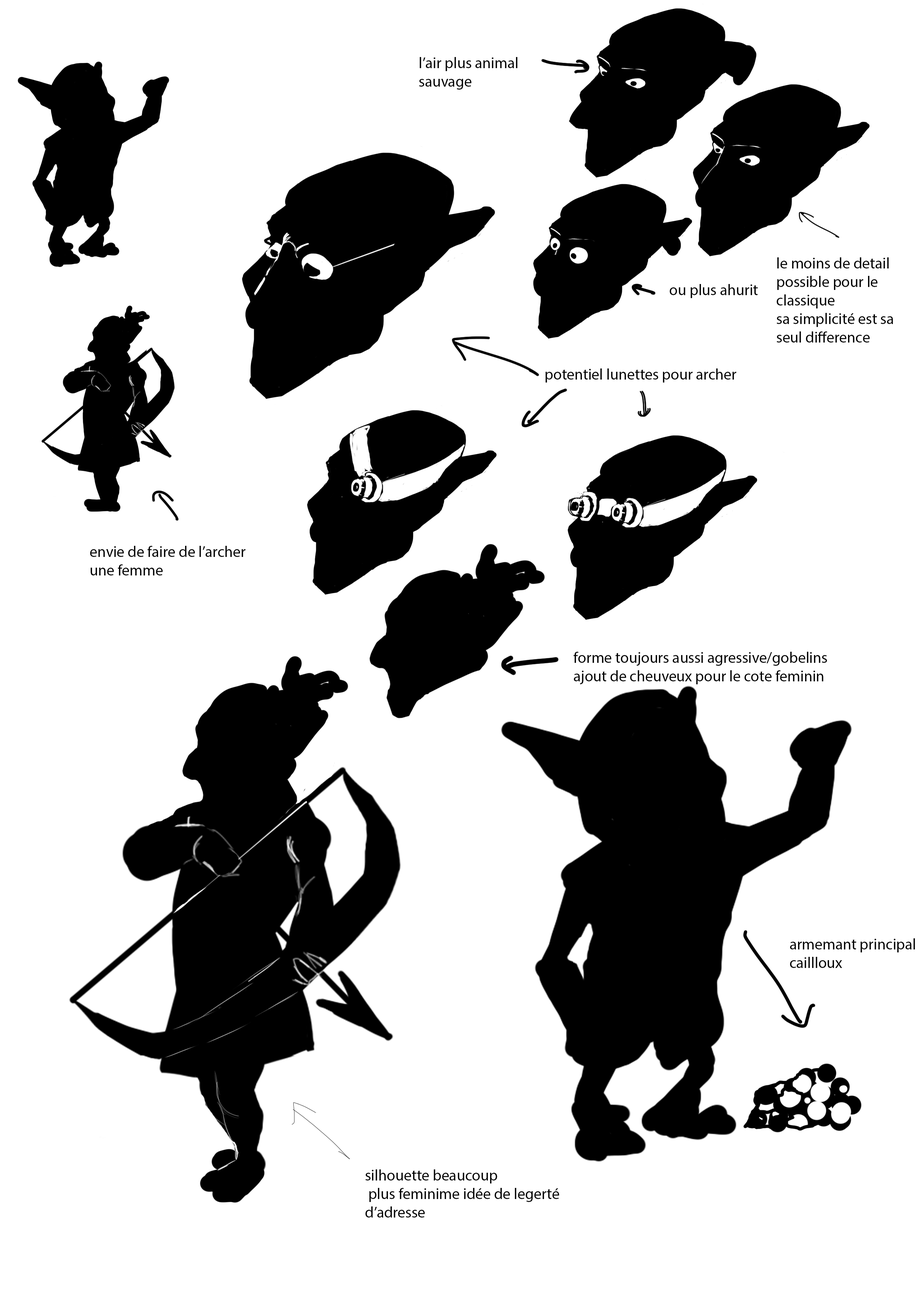
<style>
.page{position:relative;width:918px;height:1299px;background:#ffffff}
.page>*{position:absolute;margin:0}
.t1{font:15.4px "MyriadPro-Regular";color:#000000}
</style>
<div class="page">
<p class="t1" style="left:419px;top:57px;width:99px;height:33px">l’air plus animal <br>sauvage</p>
<p class="t1" style="left:777px;top:257px;width:116px;height:85px">le moins de detail <br>possible pour le <br>classique <br>sa simplicité est sa <br>seul difference</p>
<p class="t1" style="left:670px;top:284px;width:88px;height:14px">ou plus ahurit</p>
<p class="t1" style="left:545px;top:368px;width:191px;height:14px">potentiel lunettes pour archer</p>
<p class="t1" style="left:90px;top:546px;width:155px;height:29px">envie de faire de l’archer <br>une femme</p>
<p class="t1" style="left:573px;top:652px;width:254px;height:32px">forme toujours aussi agressive/gobelins <br>ajout de cheuveux pour le cote feminin</p>
<p class="t1" style="left:790px;top:938px;width:125px;height:30px">armemant principal<br>caillloux</p>
<p class="t1" style="left:365px;top:1169px;width:194px;height:48px">silhouette beaucoup<br> plus feminime idée de legerté<br>d’adresse</p>
</div>
